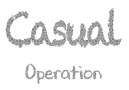
<style>
.page{position:relative;width:129px;height:90px;background:#ffffff}
.page>*{position:absolute;margin:0}
.t1{font:20px/56px "DJBChalkItUp";color:#acabac}
.t2{font:46px/56px "Chalkduster";letter-spacing:-0.08em;color:#acabac;scale:0.75 1}
</style>
<div class="page">
<p class="t1" style="left:5px;top:8px;width:117px;height:76px;text-align:center"><span class="t2">Casual<br></span>Operation</p>
</div>
